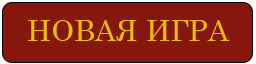
<style>
.page{position:relative;width:256px;height:64px;background:#85170f}
.page>*{position:absolute;margin:0}
.t1{font:29.2px "CenturySchoolbook";color:#eab917}
</style>
<div class="page">
<p class="t1" style="left:28px;top:20px;width:202px;height:21px">НОВАЯ ИГРА</p>
</div>
